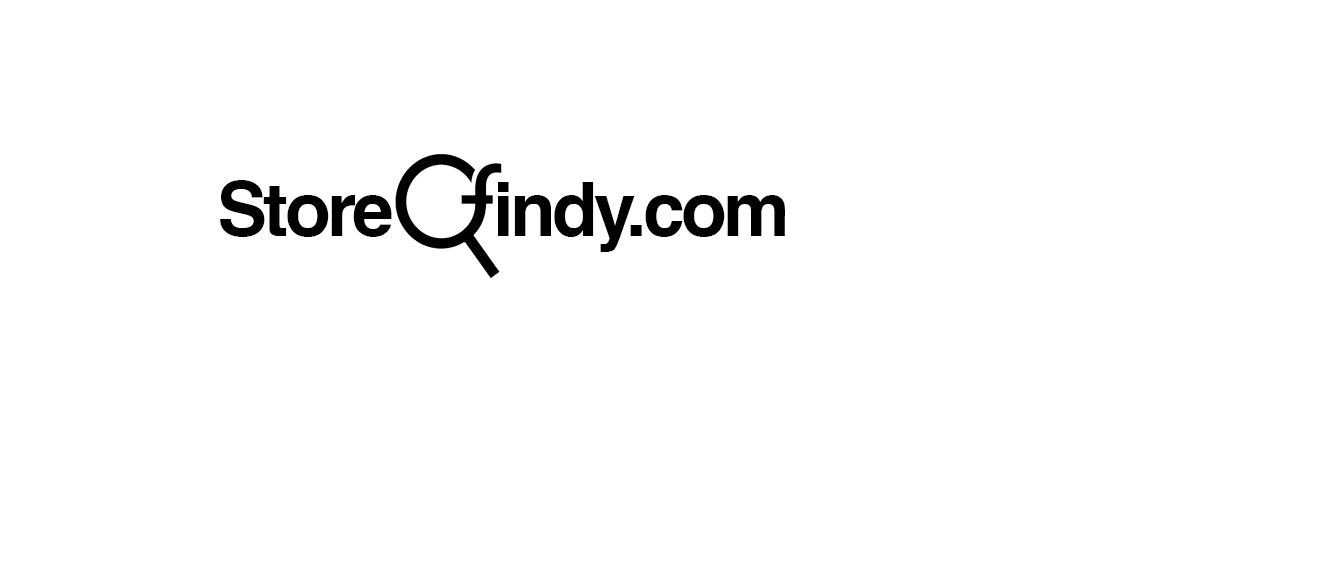
<style>
.page{position:relative;width:1335px;height:584px;background:#ffffff}
.page>*{position:absolute;margin:0}
.t1{font:75px "Helvetica-Bold";letter-spacing:-0.05em;color:#000000}
</style>
<div class="page">
<p class="t1" style="left:220px;top:180px;width:565px;height:72px">Store      indy.com</p>
</div>
